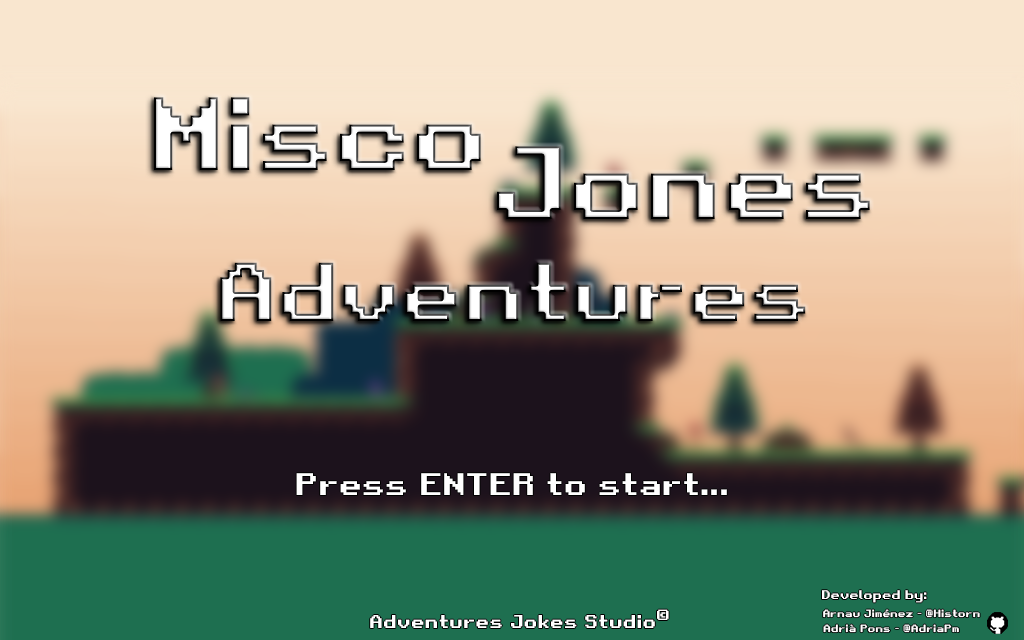
<style>
.page{position:relative;width:1024px;height:640px}
.page>*{position:absolute;margin:0}
.t1{font:30px "RetroGaming";color:#ffffff}
.t2{font:12px "RetroGaming";color:#ffffff}
.t3{font:18px "RetroGaming";color:#ffffff}
.t4{font:14px "RetroGaming";color:#ffffff}
.t5{font:10px "RetroGaming";color:#ffffff}
</style>
<div class="page">
<p class="t1" style="left:296px;top:473px;width:431px;height:22px">Press ENTER to start...</p>
<p class="t2" style="left:822px;top:590px;width:105px;height:13px">Developed by:</p>
<p class="t3" style="left:370px;top:615px;width:285px;height:13px">Adventures Jokes Studio</p>
<p class="t4" style="left:657px;top:609px;width:12px;height:11px">©</p>
<p class="t5" style="left:823px;top:609px;width:157px;height:9px">Arnau Jiménez - @Historn</p>
<p class="t5" style="left:823px;top:624px;width:136px;height:9px">Adrià Pons - @AdriaPm</p>
</div>
